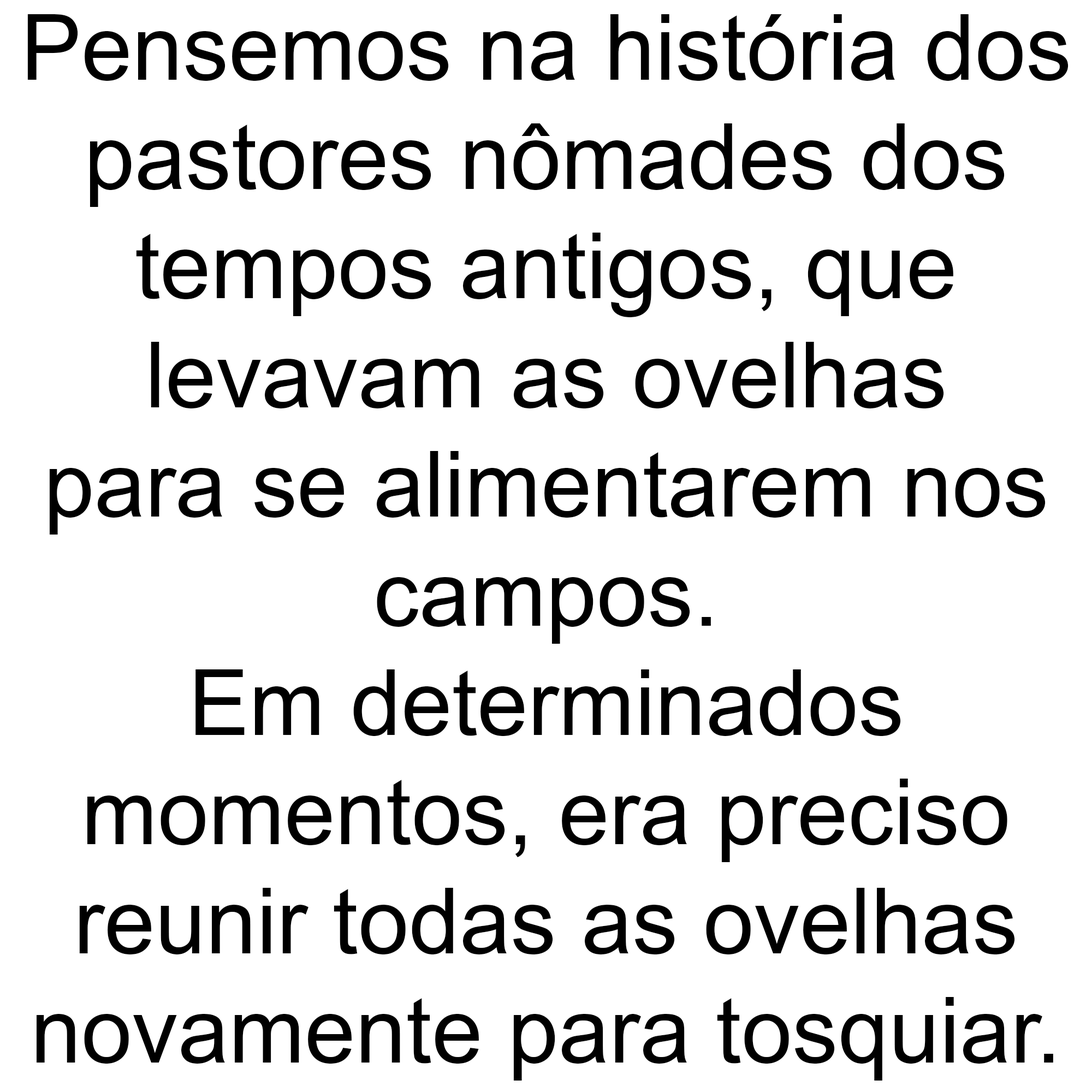
<style>
.page{position:relative;width:1092px;height:1092px;background:#ffffff}
.page>*{position:absolute;margin:0}
.t1{font:91px "ArialMT";color:#000000}
</style>
<div class="page">
<p class="t1" style="left:27px;top:14px;width:1042px;height:1067px;text-align:center">Pensemos na história dos<br>pastores nômades dos<br>tempos antigos, que<br>levavam as ovelhas<br>para se alimentarem nos<br>campos.<br>Em determinados<br>momentos, era preciso<br>reunir todas as ovelhas<br>novamente para tosquiar.</p>
</div>
